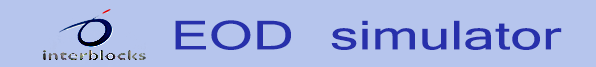
<style>
.page{position:relative;width:596px;height:67px;background:#b6c5ed}
.page>*{position:absolute;margin:0}
.t1{font:44.3px "Latha";color:#2730ab;scale:1.42 1}
</style>
<div class="page">
<p class="t1" style="left:175px;top:20px;width:387px;height:30px">EOD simulator</p>
</div>
